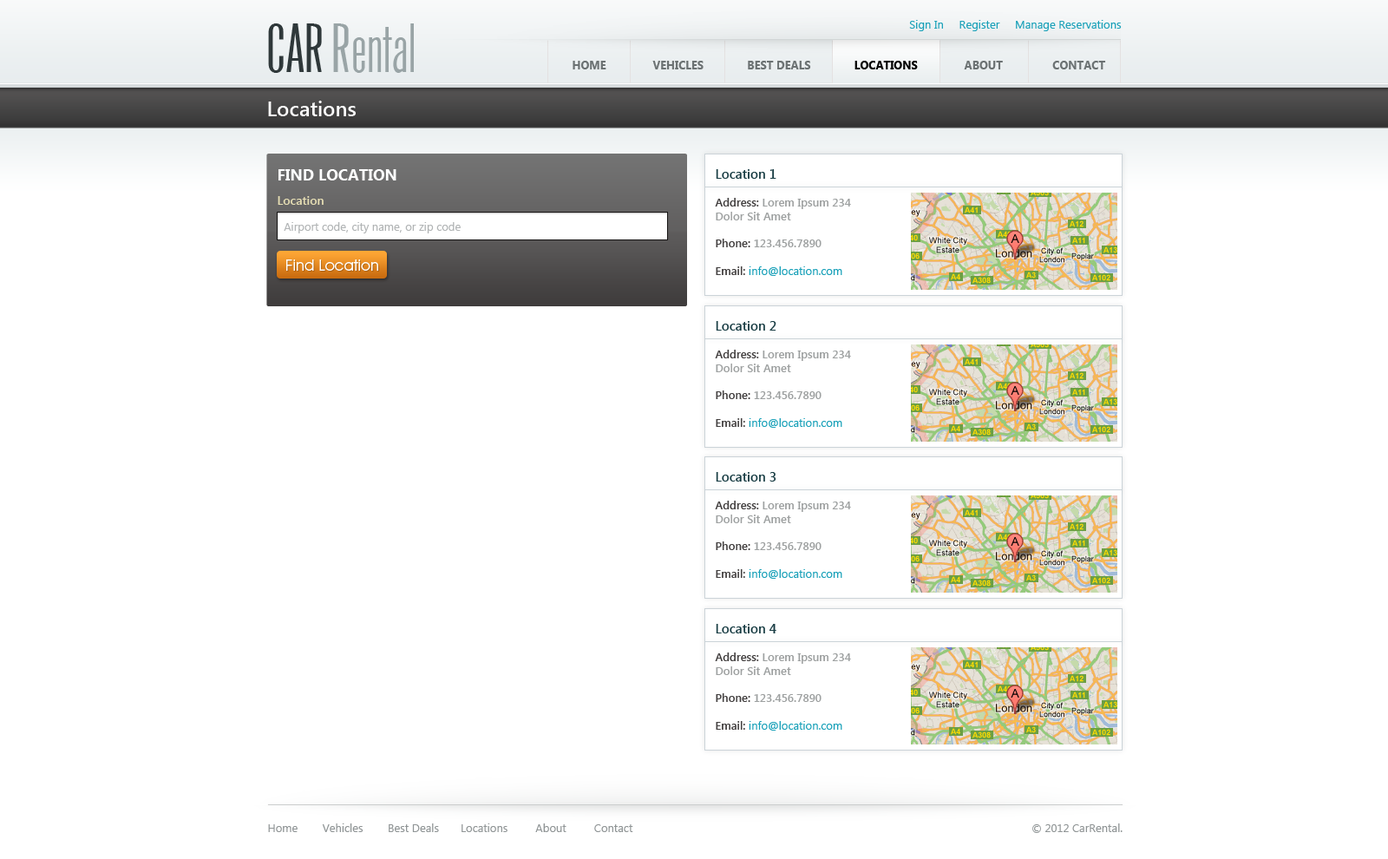
<style>
.page{position:relative;width:1388px;height:859px;background:#ffffff}
.page>*{position:absolute;margin:0}
.t1{font:62.5px "Arizona";color:#99a4a6}
.t2{font:62.5px "Arizona";color:#2f383a;text-transform:uppercase}
.t3{font:11.3px "SegoeUI";color:#1aa1b9}
.t4{font:11.3px "SegoeUI-Bold";color:#6c7273;text-transform:uppercase}
.t5{font:11.3px "SegoeUI-Bold";color:#000000;text-transform:uppercase}
.t6{font:20.8px "SegoeUI-SemiBold";color:#fefefe}
.t7{font:15.6px "SegoeUI-Bold";color:#ffffff;text-transform:uppercase}
.t8{font:11.3px "SegoeUI-SemiBold";color:#9da0a0}
.t9{font:13px "SegoeUI-SemiBold";color:#193d44}
.t10{font:11.3px "SegoeUI-SemiBold";color:#423f3f}
.t11{font:12.1px "SegoeUI-SemiBold";color:#e7dfb4}
.t12{font:11.3px "SegoeUI";color:#b1b4b5}
.t13{font:15.6px "AvantGardeITCbyBT-Book";color:#ffffff}
.t14{font:11.3px "SegoeUI";color:#909596}
</style>
<div class="page">
<p class="t1" style="left:268px;top:23px;width:146px;height:50px"><span class="t2">Car</span> Rental</p>
<p class="t3" style="left:909px;top:20px;width:213px;height:11px">Sign In     Register     Manage Reservations</p>
<p class="t4" style="left:573px;top:61px;width:533px;height:8px">Home               Vehicles              Best Deals              <span class="t5">Locations  </span>             About                Contact</p>
<p class="t6" style="left:268px;top:101px;width:88px;height:15px">Locations</p>
<p class="t7" style="left:279px;top:169px;width:118px;height:11px">Find Location</p>
<p class="t8" style="left:715px;top:169px;width:136px;height:107px"><span class="t9">Location 1<br><br></span><span class="t10">Address:</span> Lorem Ipsum 234<br>Dolor Sit Amet<br><br><span class="t10">Phone:</span> 123.456.7890<br><br><span class="t10">Email: </span><span class="t3">info@location.com</span></p>
<p class="t11" style="left:278px;top:196px;width:46px;height:9px">Location</p>
<p class="t12" style="left:284px;top:222px;width:177px;height:11px">Airport code, city name, or zip code</p>
<p class="t13" style="left:286px;top:259px;width:92px;height:12px">Find Location</p>
<p class="t8" style="left:715px;top:321px;width:136px;height:107px"><span class="t9">Location 2<br><br></span><span class="t10">Address:</span> Lorem Ipsum 234<br>Dolor Sit Amet<br><br><span class="t10">Phone:</span> 123.456.7890<br><br><span class="t10">Email: </span><span class="t3">info@location.com</span></p>
<p class="t8" style="left:715px;top:472px;width:136px;height:107px"><span class="t9">Location 3<br><br></span><span class="t10">Address:</span> Lorem Ipsum 234<br>Dolor Sit Amet<br><br><span class="t10">Phone:</span> 123.456.7890<br><br><span class="t10">Email: </span><span class="t3">info@location.com</span></p>
<p class="t8" style="left:715px;top:624px;width:136px;height:107px"><span class="t9">Location 4<br><br></span><span class="t10">Address:</span> Lorem Ipsum 234<br>Dolor Sit Amet<br><br><span class="t10">Phone:</span> 123.456.7890<br><br><span class="t10">Email: </span><span class="t3">info@location.com</span></p>
<p class="t14" style="left:268px;top:823px;width:365px;height:9px">Home        Vehicles        Best Deals       Locations         About         Contact</p>
<p class="t14" style="left:1032px;top:823px;width:91px;height:10px">© 2012 CarRental.</p>
</div>
